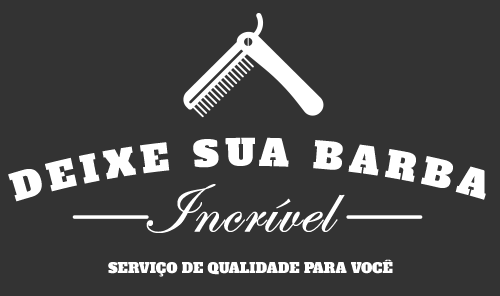
<style>
.page{position:relative;width:500px;height:296px;background:#333333}
.page>*{position:absolute;margin:0}
.t1{font:36px/90px "AlfaSlabOne-Regular";letter-spacing:0.175em;color:#ffffff;text-transform:uppercase}
.t2{font:72px "EdwardianScriptITC";letter-spacing:0.005em;color:#ffffff;font-weight:bold}
.t3{font:14px "AlfaSlabOne-Regular";color:#ffffff;text-transform:uppercase}
</style>
<div class="page">
<p class="t1" style="left:8px;top:137px;width:478px;height:65px">DEIXE SUA BARBA</p>
<p class="t2" style="left:146px;top:184px;width:199px;height:49px">Incrível</p>
<p class="t3" style="left:108px;top:259px;width:285px;height:18px">Serviço de Qualidade para você</p>
</div>
